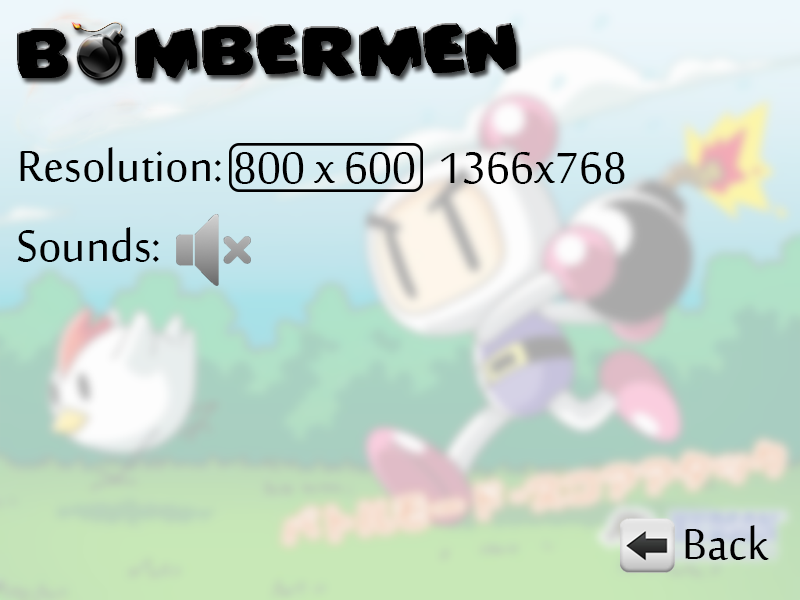
<style>
.page{position:relative;width:800px;height:600px}
.page>*{position:absolute;margin:0}
.t1{font:59px "SakkalMajalla";color:#000000}
</style>
<div class="page">
<p class="t1" style="left:20px;top:147px;width:201px;height:35px">Resolution:</p>
<p class="t1" style="left:235px;top:152px;width:180px;height:32px">800 x 600</p>
<p class="t1" style="left:441px;top:152px;width:184px;height:32px">1366x768</p>
<p class="t1" style="left:17px;top:227px;width:142px;height:35px">Sounds:</p>
<p class="t1" style="left:685px;top:525px;width:84px;height:35px">Back</p>
</div>
